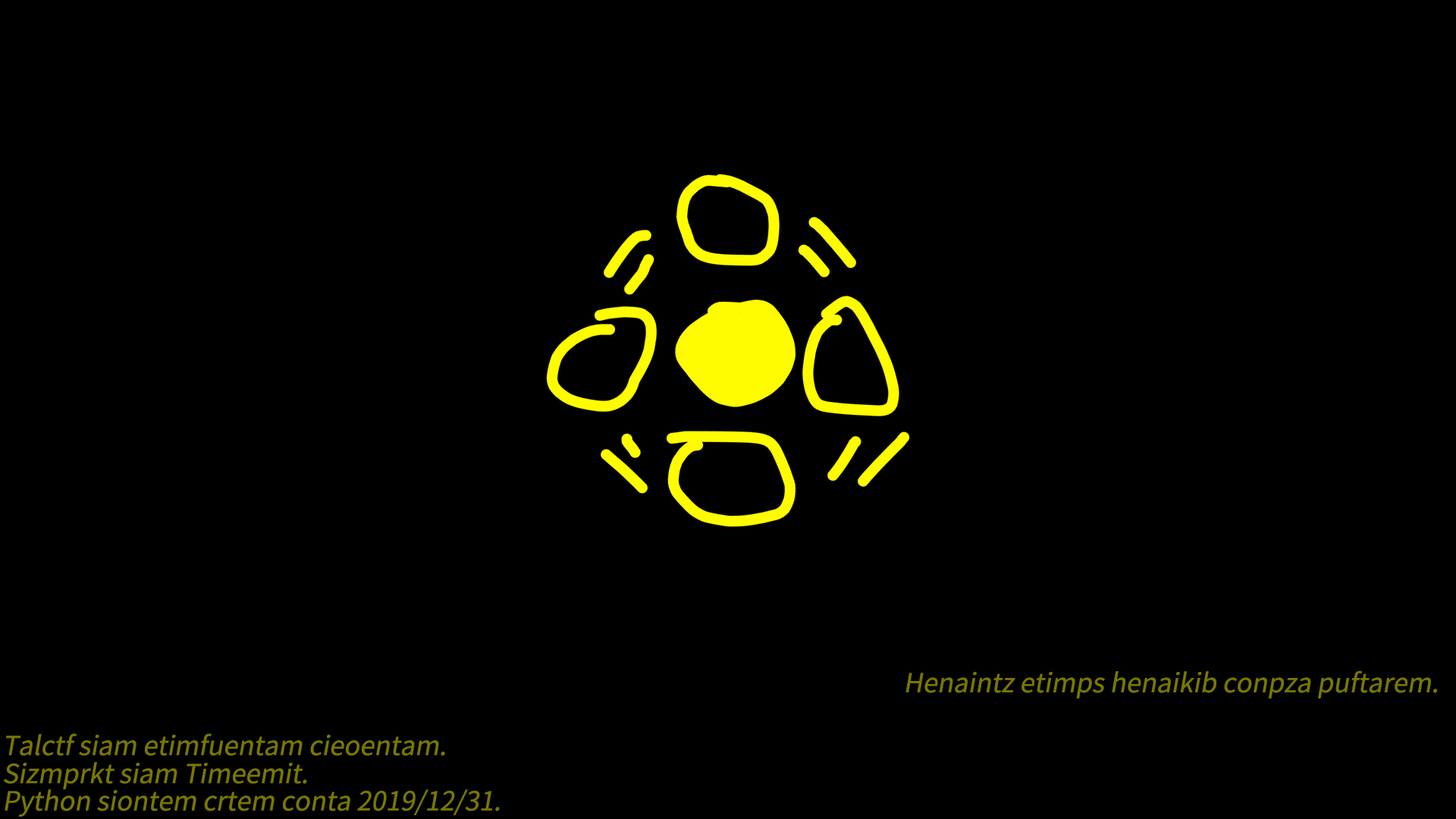
<style>
.page{position:relative;width:1456px;height:819px;background:#000000}
.page>*{position:absolute;margin:0}
.t1{font:26.2px "SourceHanSansCN-Regular";color:#797800;font-style:italic}
</style>
<div class="page">
<p class="t1" style="left:905px;top:670px;width:532px;height:28px">Henaintz etimps henaikib conpza puftarem.</p>
<p class="t1" style="left:6px;top:733px;width:439px;height:23px">Talctf siam etimfuentam cieoentam.</p>
<p class="t1" style="left:4px;top:762px;width:303px;height:27px">Sizmprkt siam Timeemit.</p>
<p class="t1" style="left:5px;top:789px;width:495px;height:28px">Python siontem crtem conta 2019/12/31.</p>
</div>
